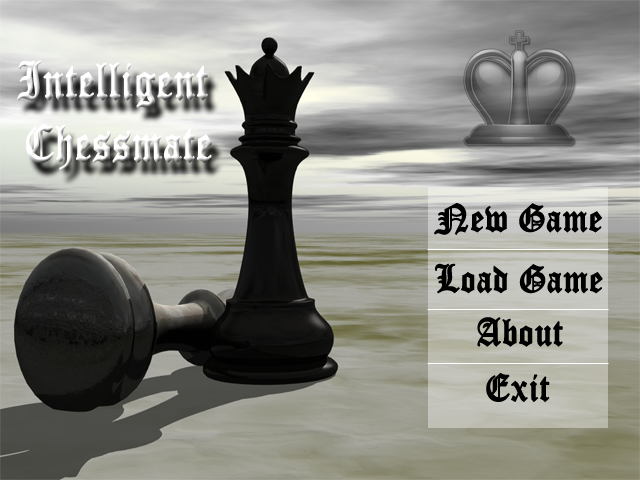
<style>
.page{position:relative;width:640px;height:480px}
.page>*{position:absolute;margin:0}
.t1{font:38px "OldEnglishTextMT";letter-spacing:0.005em;color:#000000;font-weight:bold;scale:0.89 1}
</style>
<div class="page">
<p class="t1" style="left:434px;top:203px;width:168px;height:32px">New Game</p>
<p class="t1" style="left:435px;top:263px;width:168px;height:31px">Load Game</p>
<p class="t1" style="left:477px;top:317px;width:86px;height:30px">About</p>
<p class="t1" style="left:486px;top:372px;width:64px;height:31px">Exit</p>
</div>
